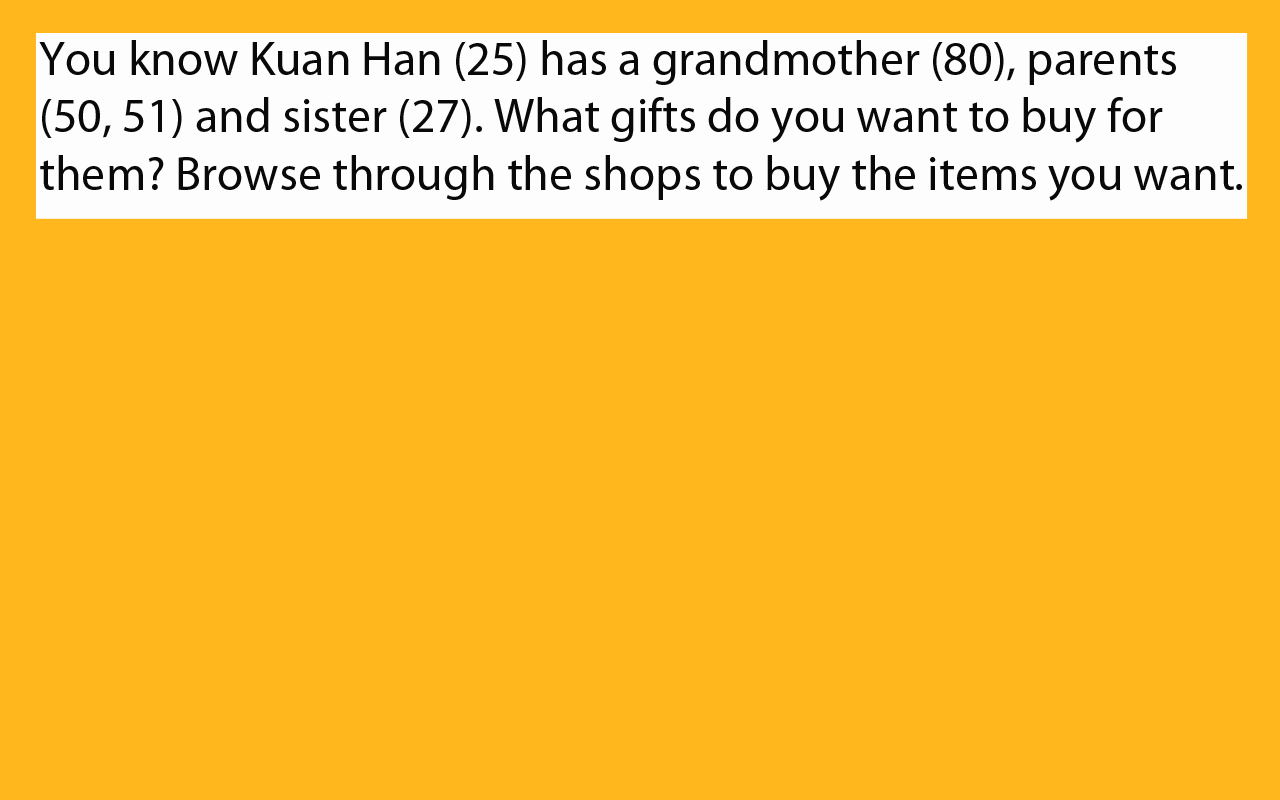
<style>
.page{position:relative;width:1280px;height:800px;background:#ffb71d}
.page>*{position:absolute;margin:0}
.t1{font:48px "MyriadPro-Regular";color:#090909}
</style>
<div class="page">
<p class="t1" style="left:39px;top:40px;width:1203px;height:161px">You know Kuan Han (25) has a grandmother (80), parents (50, 51) and sister (27). What gifts do you want to buy for them? Browse through the shops to buy the items you want.</p>
</div>
